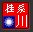
<style>
.page{position:relative;width:33px;height:32px;background:#f20000}
.page>*{position:absolute;margin:0}
.t1{font:10.4px "SimSun";color:#ffffff}
.t2{font:11.7px "SimSun";color:#ffffff}
</style>
<div class="page">
<p class="t1" style="left:5px;top:4px;width:20px;height:9px">桂系</p>
<p class="t2" style="left:16px;top:15px;width:11px;height:12px">川</p>
</div>
